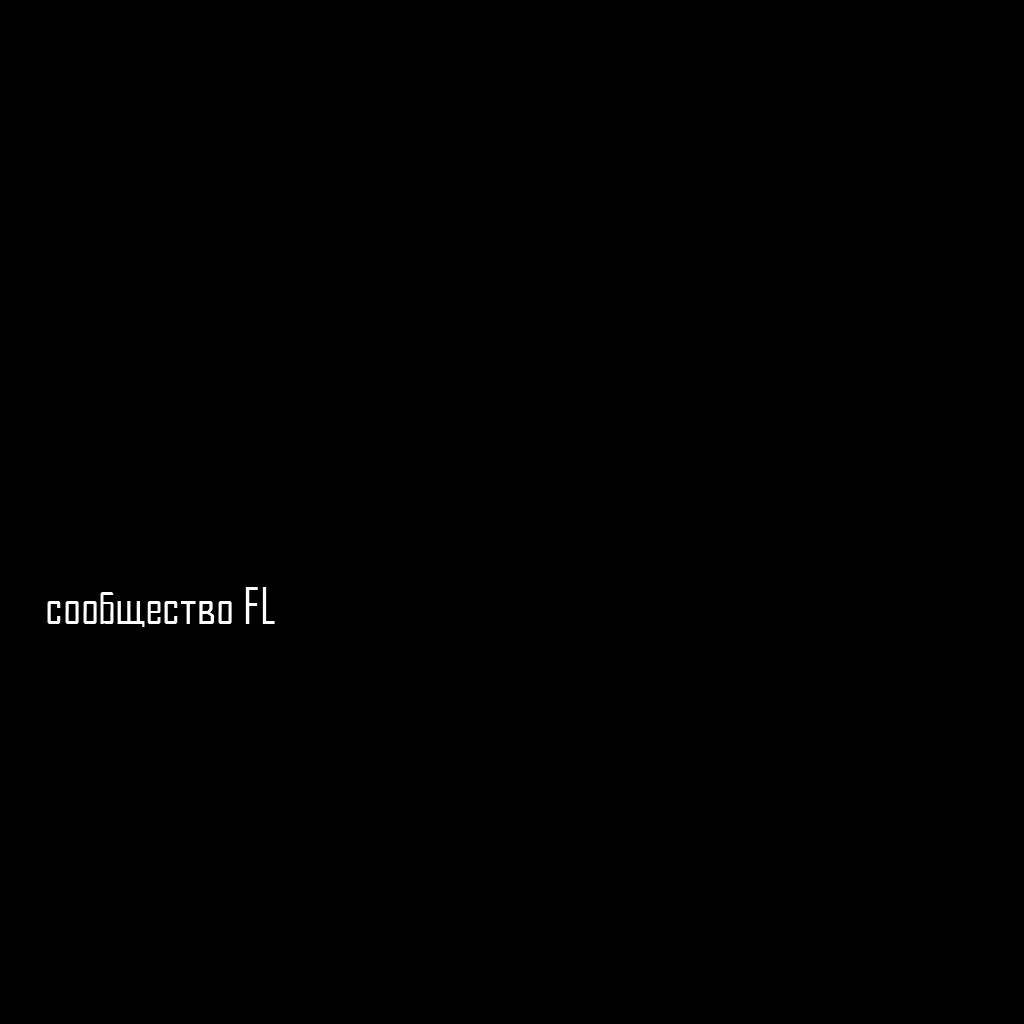
<style>
.page{position:relative;width:1024px;height:1024px;background:#000000}
.page>*{position:absolute;margin:0}
.t1{font:48px "AgencyFBCyrillic";color:#ffffff}
</style>
<div class="page">
<p class="t1" style="left:47px;top:587px;width:228px;height:40px">сообщество FL</p>
</div>
